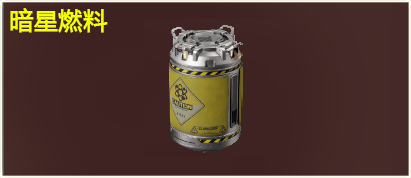
<style>
.page{position:relative;width:411px;height:178px}
.page>*{position:absolute;margin:0}
.t1{font:24px "MicrosoftYaHei";color:#f4ff00;font-weight:bold}
</style>
<div class="page">
<p class="t1" style="left:10px;top:8px;width:98px;height:25px">暗星燃料</p>
</div>
